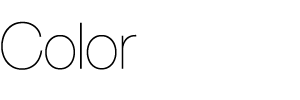
<style>
.page{position:relative;width:300px;height:100px;background:#ffffff}
.page>*{position:absolute;margin:0}
.t1{font:64px "HelveticaNeue-UltraLight";color:#000000}
</style>
<div class="page">
<p class="t1" style="left:1px;top:21px;width:136px;height:49px">Color</p>
</div>
